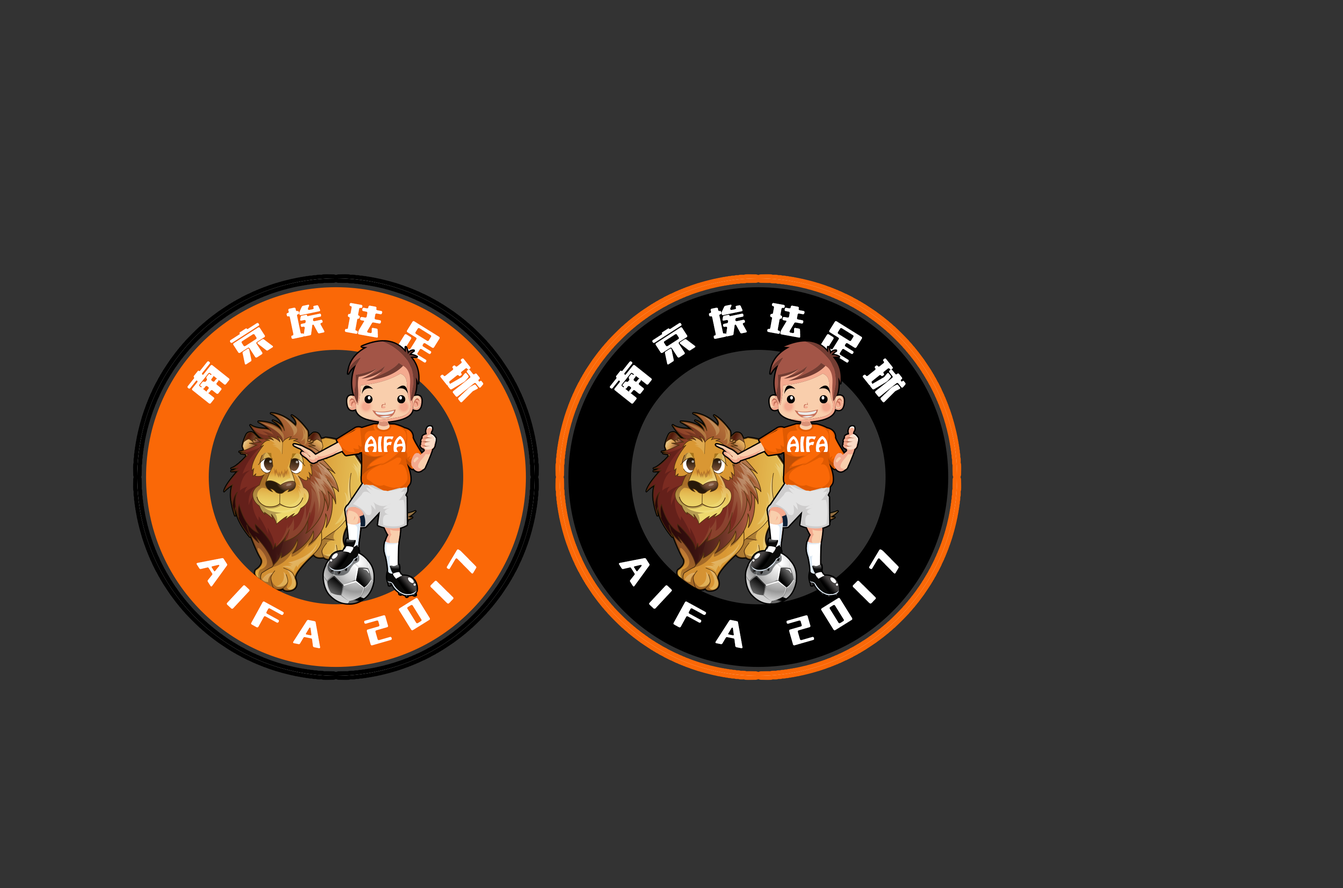
<style>
.page{position:relative;width:1343px;height:888px;background:#333333}
.page>*{position:absolute;margin:0}
.t1{font:35.5px "Tensentype-ChaoYuanJ";letter-spacing:0.54em;color:#ffffff}
.t2{font:18.5px "HoboStd";color:#ffffff}
</style>
<div class="page">
<p class="t1" style="left:187px;top:303px;width:296px;height:101px;rotate:136deg">南京埃珐足球</p>
<p class="t1" style="left:610px;top:303px;width:295px;height:101px;rotate:136deg">南京埃珐足球</p>
<p class="t2" style="left:365px;top:436px;width:40px;height:16px">AIFA</p>
<p class="t2" style="left:787px;top:436px;width:41px;height:16px">AIFA</p>
<p class="t1" style="left:196px;top:549px;width:280px;height:99px;rotate:1deg">AIFA 2017</p>
<p class="t1" style="left:619px;top:549px;width:280px;height:99px;rotate:1deg">AIFA 2017</p>
</div>
